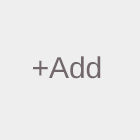
<style>
.page{position:relative;width:140px;height:140px;background:#eeeeee}
.page>*{position:absolute;margin:0}
.t1{font:30px "LiberationSans";color:#72676a}
</style>
<div class="page">
<p class="t1" style="left:33px;top:56px;width:68px;height:23px">+Add</p>
</div>
